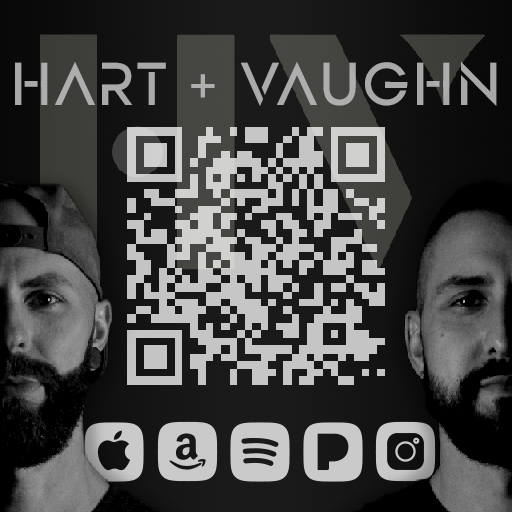
<style>
.page{position:relative;width:512px;height:512px}
.page>*{position:absolute;margin:0}
.t1{font:88px "DesignerRegular";color:#a9a9aa}
</style>
<div class="page">
<p class="t1" style="left:15px;top:61px;width:482px;height:45px">HART + VAUGHN</p>
</div>
